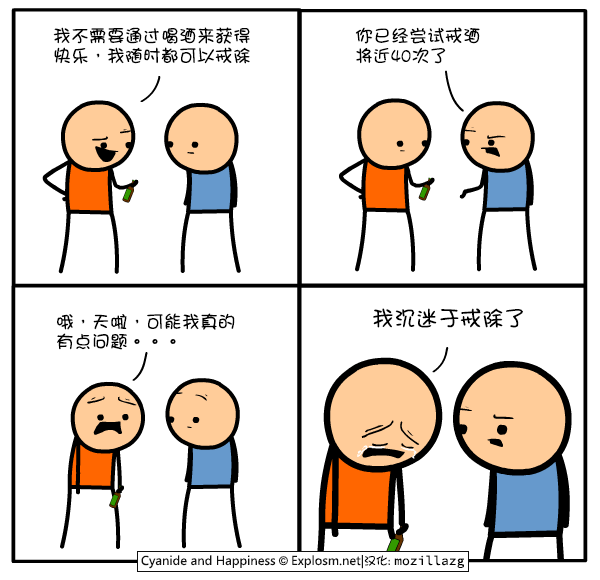
<style>
.page{position:relative;width:600px;height:580px;background:#ffffff}
.page>*{position:absolute;margin:0}
.t1{font:18px/20px "DFGirl";color:#000000}
.t2{font:22px "DFGirl";color:#000000}
</style>
<div class="page">
<p class="t1" style="left:53px;top:27px;width:197px;height:37px">我不需要通过喝酒来获得<br>快乐，我随时都可以戒除</p>
<p class="t1" style="left:355px;top:27px;width:125px;height:37px">你已经尝试戒酒<br>将近40次了</p>
<p class="t1" style="left:57px;top:313px;width:178px;height:37px">哦，天啦，可能我真的<br>有点问题。。。</p>
<p class="t2" style="left:373px;top:308px;width:150px;height:20px">我沉迷于戒除了</p>
</div>
